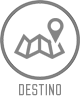
<style>
.page{position:relative;width:80px;height:100px;background:#ffffff}
.page>*{position:absolute;margin:0}
.t1{font:14px "Clarke";color:#858585}
</style>
<div class="page">
<p class="t1" style="left:19px;top:84px;width:42px;height:12px">DESTINO</p>
</div>
